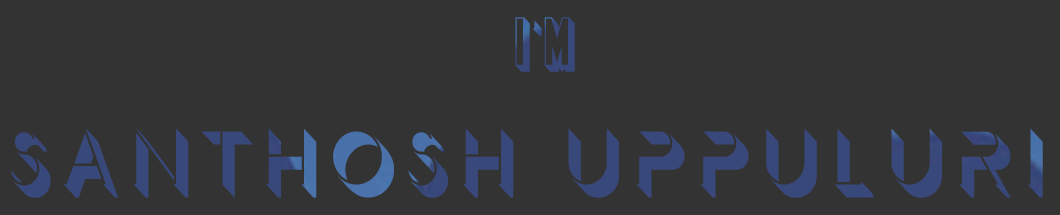
<style>
.page{position:relative;width:1060px;height:215px;background:#333333}
.page>*{position:absolute;margin:0}
.t1{font:113.7px "Demode-Regular";color:#38487b;scale:0.92 1}
.t2{font:90.8px "Demode-Regular";color:#38487b;scale:0.92 1}
.t3{font:67.9px "Franchise-Regular";color:#38487b;scale:0.92 1}
.t4{font:67.9px "Demode-Regular";color:#38487b;scale:0.92 1}
</style>
<div class="page">
<p class="t1" style="left:11px;top:17px;width:1032px;height:181px"><span class="t2">                   </span><span class="t3">I</span><span class="t4">'</span><span class="t3">M<br></span>Santhosh Uppuluri</p>
</div>
